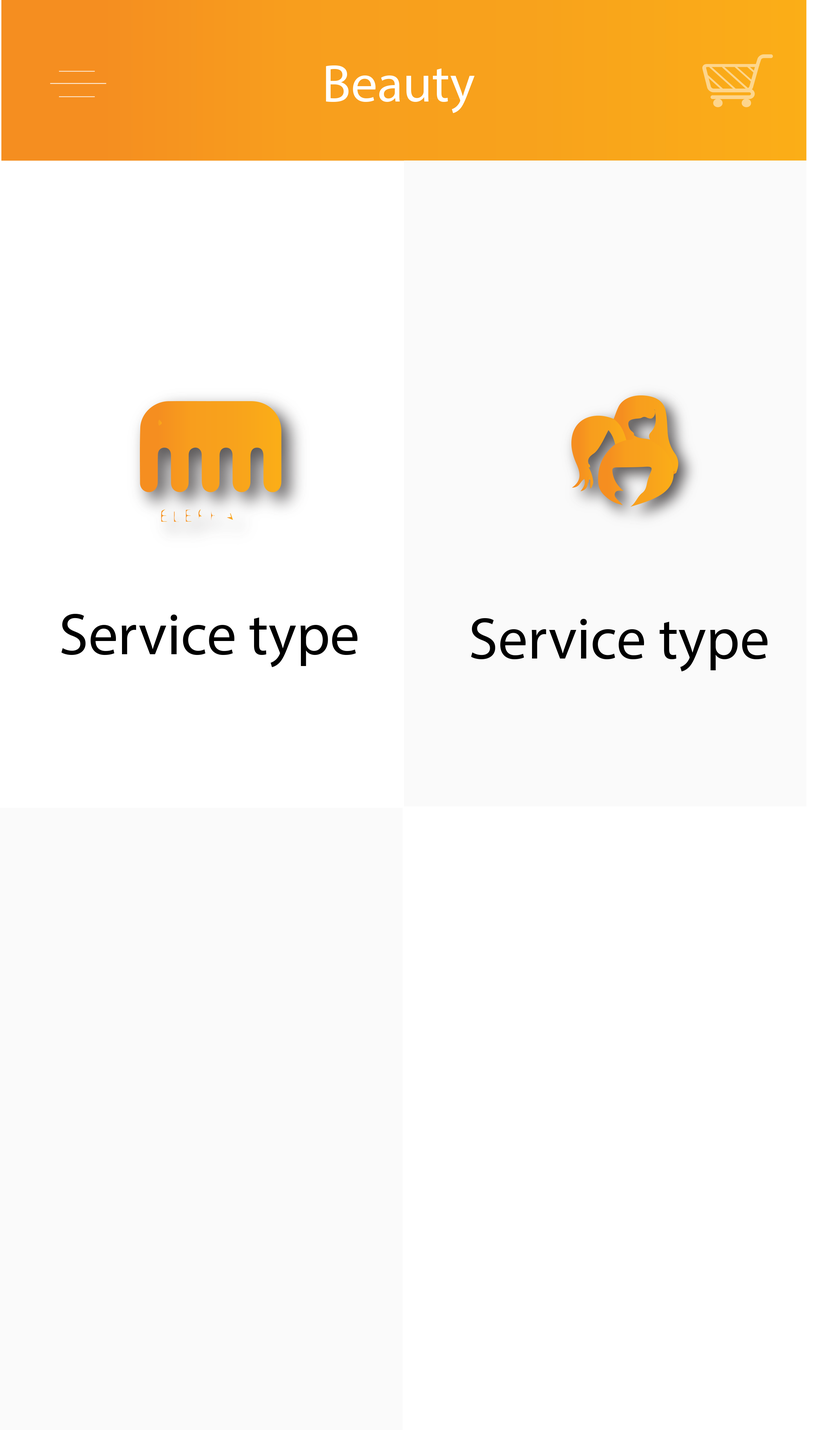
<style>
.page{position:relative;width:834px;height:1430px;background:#ffffff}
.page>*{position:absolute;margin:0}
.t1{font:52.9px "Roboto-Regular";color:#ffffff}
.t2{font:58.9px "Roboto-Regular";color:#000000}
</style>
<div class="page">
<p class="t1" style="left:326px;top:65px;width:149px;height:48px">Beauty</p>
<p class="t2" style="left:62px;top:614px;width:296px;height:54px">Service type</p>
<p class="t2" style="left:471px;top:618px;width:296px;height:54px">Service type</p>
</div>
